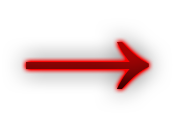
<style>
.page{position:relative;width:186px;height:128px;background:#ffffff}
.page>*{position:absolute;margin:0}
.t1{font:133.2px "TimesNewRomanPSMT";color:#850404}
</style>
<div class="page">
<p class="t1" style="left:26px;top:42px;width:123px;height:47px">→</p>
</div>
